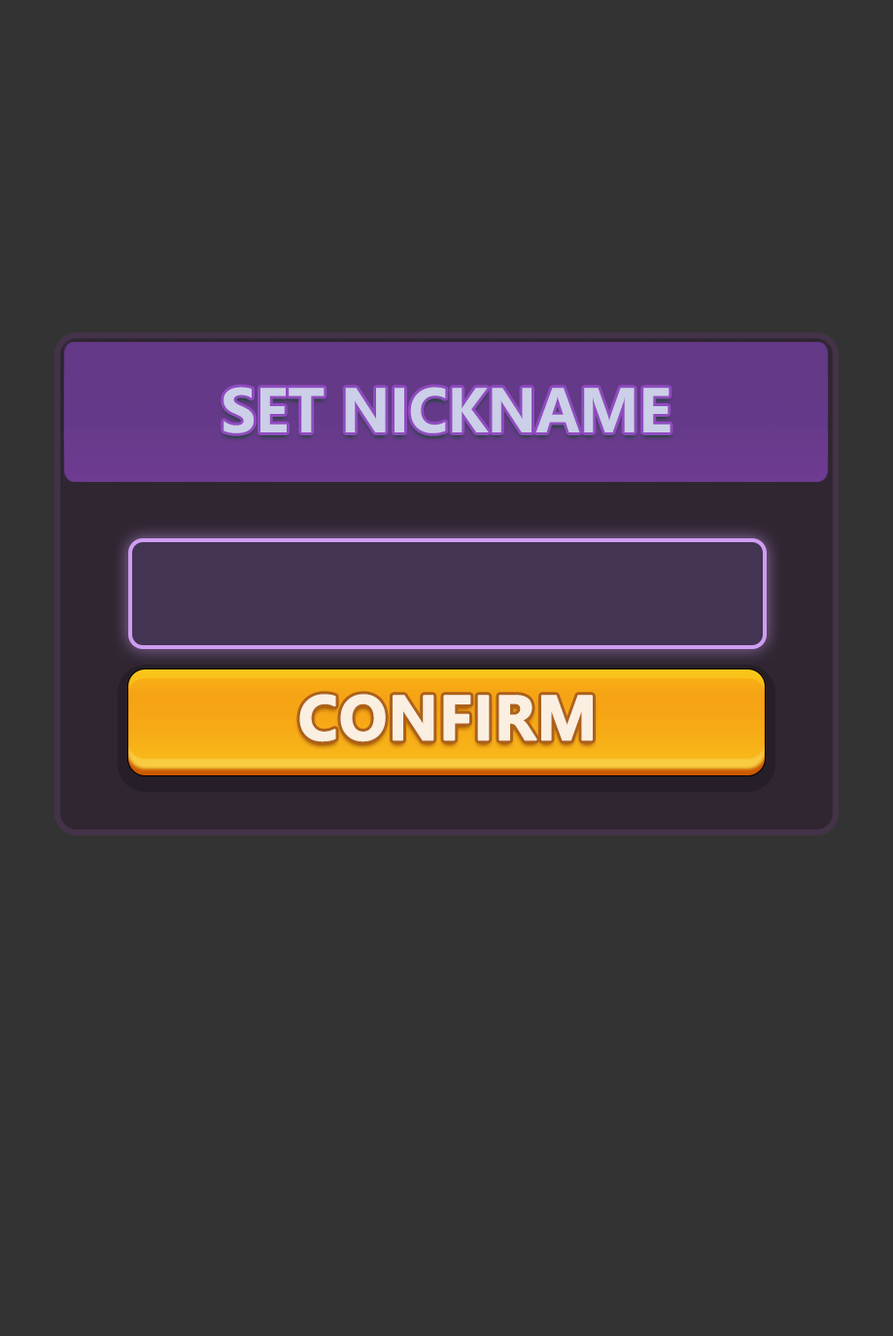
<style>
.page{position:relative;width:893px;height:1336px;background:#333333}
.page>*{position:absolute;margin:0}
.t1{font:58.3px "MicrosoftYaHei-Bold";letter-spacing:-0.01em;color:#cccfe8;text-transform:uppercase}
.t2{font:58.2px "MicrosoftYaHei-Bold";color:#f9e5d3;text-transform:uppercase;font-weight:bold}
</style>
<div class="page">
<p class="t1" style="left:223px;top:387px;width:447px;height:46px">SET NICKNAME</p>
<p class="t2" style="left:299px;top:694px;width:294px;height:48px">CONFIRM</p>
</div>
